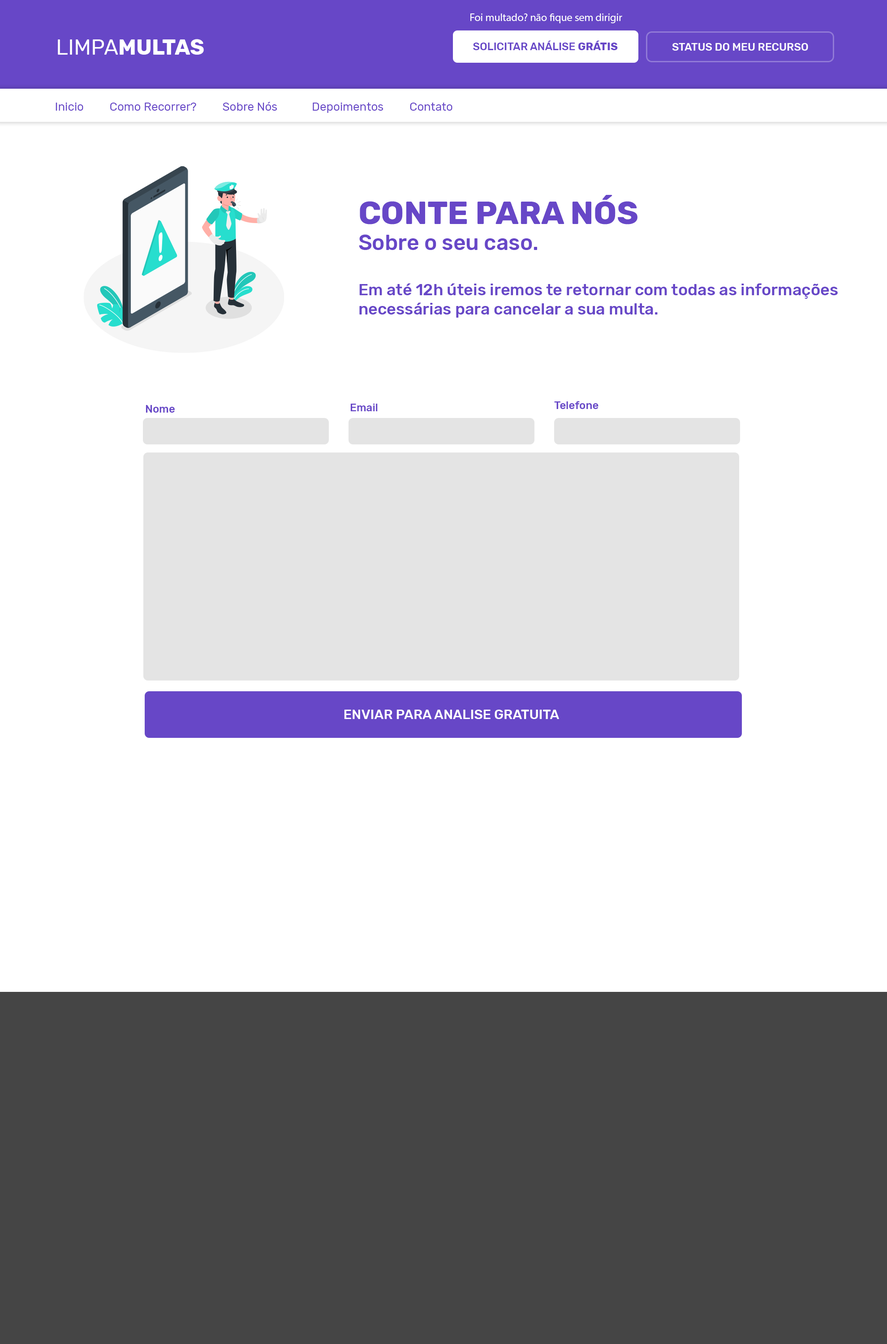
<style>
.page{position:relative;width:887px;height:1344px;background:#ffffff}
.page>*{position:absolute;margin:0}
.t1{font:10.8px "MyriadPro-Regular";color:#ffffff}
.t2{font:21.5px "Rubik-Bold";color:#ffffff}
.t3{font:21.5px "Rubik-Regular";color:#ffffff}
.t4{font:10.8px "Rubik-Medium";color:#6747c7}
.t5{font:10.8px "Rubik-Bold";color:#6747c7}
.t6{font:10.8px "Rubik-Medium";color:#ffffff}
.t7{font:11.6px "Rubik-Regular";color:#6747c7}
.t8{font:16.1px "Rubik-Medium";color:#6747c7}
.t9{font:32.3px "Rubik-Bold";color:#6747c7}
.t10{font:21.5px "Rubik-Medium";color:#6747c7}
.t11{font:13.4px "Rubik-Medium";color:#ffffff}
</style>
<div class="page">
<p class="t1" style="left:470px;top:13px;width:152px;height:10px">Foi multado? não fique sem dirigir</p>
<p class="t2" style="left:58px;top:39px;width:146px;height:16px"><span class="t3">LIMPA</span>MULTAS</p>
<p class="t4" style="left:473px;top:40px;width:145px;height:10px">SOLICITAR ANÁLISE <span class="t5">GRÁTIS</span></p>
<p class="t6" style="left:672px;top:43px;width:136px;height:8px">STATUS DO MEU RECURSO</p>
<p class="t7" style="left:56px;top:102px;width:397px;height:11px">Inicio         Como Recorrer?         Sobre Nós            Depoimentos         Contato</p>
<p class="t8" style="left:359px;top:195px;width:479px;height:123px"><span class="t9">CONTE PARA NÓS<br></span><span class="t10">Sobre o seu caso.<br><br></span>Em até 12h úteis iremos te retornar com todas as informações necessárias para cancelar a sua multa.</p>
<p class="t4" style="left:554px;top:401px;width:45px;height:8px">Telefone</p>
<p class="t4" style="left:146px;top:405px;width:29px;height:8px">Nome</p>
<p class="t4" style="left:350px;top:404px;width:28px;height:7px">Email</p>
<p class="t11" style="left:344px;top:710px;width:215px;height:9px">ENVIAR PARA ANALISE GRATUITA</p>
</div>
